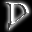
<style>
.page{position:relative;width:32px;height:32px;background:#000000}
.page>*{position:absolute;margin:0}
.t1{font:30px "HorstRomanGothic";font-weight:bold}
</style>
<div class="page">
<p class="t1" style="left:4px;top:2px;width:25px;height:29px">D</p>
</div>
